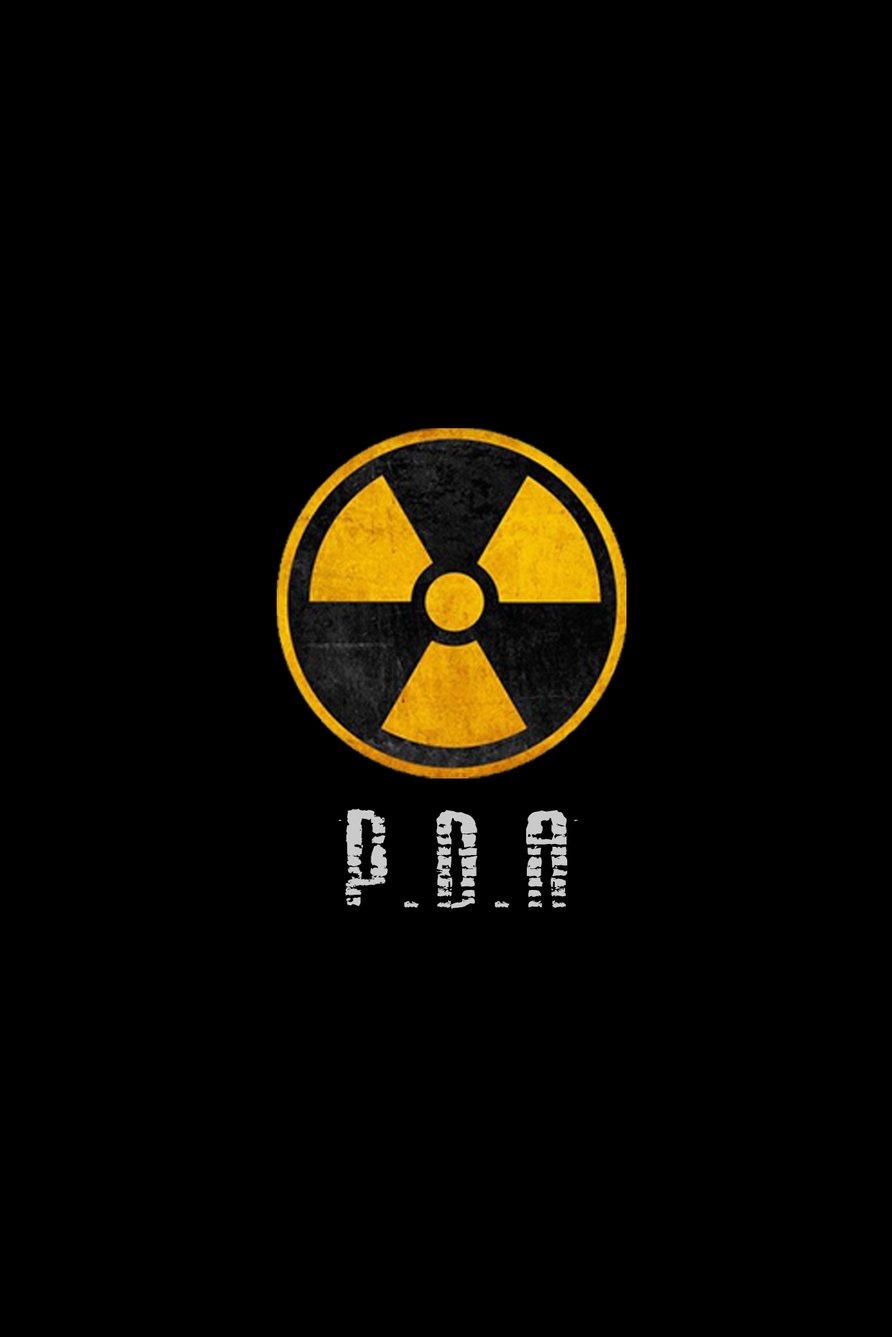
<style>
.page{position:relative;width:892px;height:1337px;background:#000000}
.page>*{position:absolute;margin:0}
.t1{font:128.8px "AmazS.T.A.L.K.E.R.v.3.0";letter-spacing:0.05em;color:#cacaca;scale:1.5 1}
</style>
<div class="page">
<p class="t1" style="left:339px;top:809px;width:238px;height:100px">P.D.A</p>
</div>
